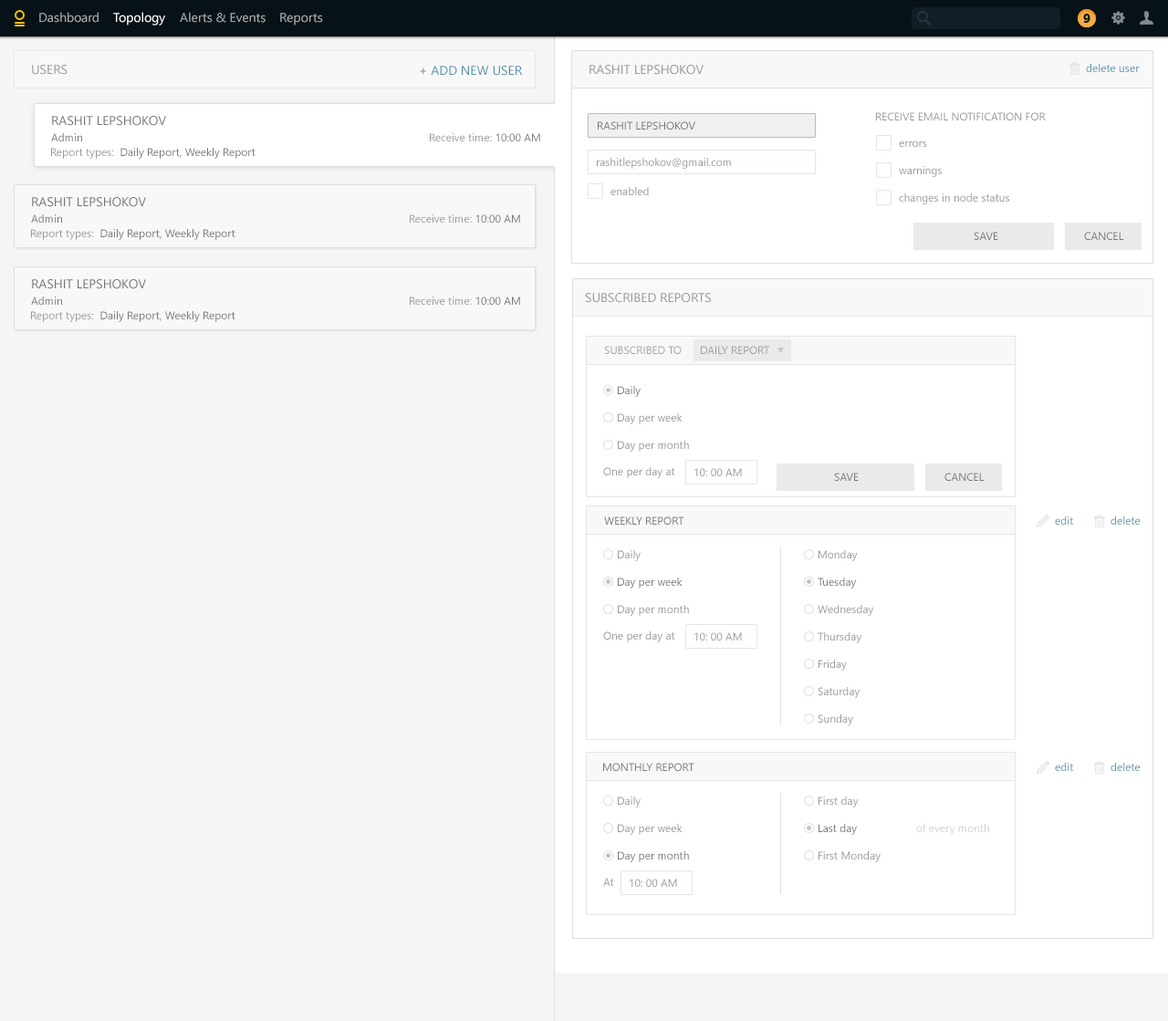
<style>
.page{position:relative;width:1168px;height:1021px;background:#ffffff}
.page>*{position:absolute;margin:0}
.t1{font:12.8px "SegoeUI";color:#a4a6a7}
.t2{font:12.8px "SegoeUI";color:#fefefe}
.t3{font:12.8px "SegoeUI-Bold";color:#071118}
.t4{font:12.8px "SegoeUI";color:#999999;text-transform:uppercase}
.t5{font:12.8px "SegoeUI";color:#5693ae;text-transform:uppercase}
.t6{font:10.9px "SegoeUI";color:#5693ae}
.t7{font:10.9px "SegoeUI";color:#999999;text-transform:uppercase}
.t8{font:12.8px "SegoeUI";color:#777777;text-transform:uppercase}
.t9{font:10.9px "SegoeUI";color:#777777;text-transform:uppercase}
.t10{font:10.9px "SegoeUI";color:#777777}
.t11{font:10.9px "SegoeUI";color:#999999}
.t12{font:10.9px "SegoeUI";color:#a4a4a4;text-transform:uppercase}
.t13{font:10.9px "SegoeUI";color:#9f9f9f;text-transform:uppercase}
.t14{font:10.9px "SegoeUI";color:#5895af}
.t15{font:10.9px "SegoeUI";color:#d2d2d2}
</style>
<div class="page">
<p class="t1" style="left:39px;top:12px;width:60px;height:11px">Dashboard</p>
<p class="t2" style="left:113px;top:12px;width:52px;height:14px">Topology</p>
<p class="t1" style="left:180px;top:12px;width:86px;height:11px">Alerts &amp; Events</p>
<p class="t1" style="left:280px;top:13px;width:43px;height:13px">Reports</p>
<p class="t3" style="left:1083px;top:14px;width:7px;height:9px;opacity:0.7">9</p>
<p class="t3" style="left:1083px;top:14px;width:7px;height:9px">9</p>
<p class="t4" style="left:32px;top:65px;width:36px;height:10px">Users</p>
<p class="t5" style="left:420px;top:66px;width:103px;height:10px">+ add new User</p>
<p class="t4" style="left:589px;top:65px;width:114px;height:10px">Rashit Lepshokov</p>
<p class="t6" style="left:1086px;top:64px;width:54px;height:8px">delete user</p>
<p class="t7" style="left:876px;top:112px;width:170px;height:8px">receive email notification for</p>
<p class="t8" style="left:52px;top:116px;width:114px;height:10px">Rashit Lepshokov</p>
<p class="t9" style="left:598px;top:121px;width:97px;height:9px">Rashit Lepshokov</p>
<p class="t10" style="left:51px;top:133px;width:31px;height:8px">Admin</p>
<p class="t11" style="left:430px;top:133px;width:110px;height:8px">Receive time: <span class="t10">10:00 AM</span></p>
<p class="t10" style="left:51px;top:148px;width:204px;height:11px"><span class="t11">Report types: </span> Daily Report, Weekly Report</p>
<p class="t11" style="left:899px;top:141px;width:28px;height:6px">errors</p>
<p class="t11" style="left:597px;top:158px;width:134px;height:11px">rashitlepshokov@gmail.com</p>
<p class="t11" style="left:899px;top:166px;width:43px;height:11px">warnings</p>
<p class="t8" style="left:32px;top:197px;width:114px;height:10px">Rashit Lepshokov</p>
<p class="t11" style="left:610px;top:187px;width:39px;height:8px">enabled</p>
<p class="t11" style="left:899px;top:193px;width:110px;height:11px">changes in node status</p>
<p class="t10" style="left:31px;top:214px;width:31px;height:9px">Admin</p>
<p class="t11" style="left:410px;top:214px;width:110px;height:9px">Receive time: <span class="t10">10:00 AM</span></p>
<p class="t10" style="left:31px;top:229px;width:204px;height:11px"><span class="t11">Report types: </span> Daily Report, Weekly Report</p>
<p class="t9" style="left:974px;top:232px;width:24px;height:8px">Save</p>
<p class="t9" style="left:1084px;top:232px;width:40px;height:8px">Cancel</p>
<p class="t8" style="left:32px;top:279px;width:114px;height:10px">Rashit Lepshokov</p>
<p class="t4" style="left:585px;top:293px;width:126px;height:10px">Subscribed reports</p>
<p class="t10" style="left:31px;top:297px;width:31px;height:8px">Admin</p>
<p class="t11" style="left:410px;top:297px;width:110px;height:8px">Receive time: <span class="t10">10:00 AM</span></p>
<p class="t10" style="left:31px;top:311px;width:204px;height:11px"><span class="t11">Report types: </span> Daily Report, Weekly Report</p>
<p class="t12" style="left:604px;top:346px;width:78px;height:8px">Subscribed to</p>
<p class="t13" style="left:701px;top:346px;width:68px;height:8px">Daily Report</p>
<p class="t10" style="left:618px;top:386px;width:23px;height:11px">Daily</p>
<p class="t11" style="left:618px;top:413px;width:64px;height:11px">Day per week</p>
<p class="t11" style="left:618px;top:441px;width:71px;height:11px">Day per month</p>
<p class="t11" style="left:603px;top:467px;width:72px;height:11px">One per day at</p>
<p class="t11" style="left:694px;top:468px;width:48px;height:8px">10: 00 AM</p>
<p class="t9" style="left:834px;top:473px;width:25px;height:8px">Save</p>
<p class="t9" style="left:944px;top:473px;width:41px;height:8px">Cancel</p>
<p class="t9" style="left:604px;top:516px;width:80px;height:9px">Weekly Report</p>
<p class="t14" style="left:1055px;top:516px;width:18px;height:9px">edit</p>
<p class="t14" style="left:1110px;top:516px;width:31px;height:9px">delete</p>
<p class="t11" style="left:618px;top:550px;width:23px;height:11px">Daily</p>
<p class="t11" style="left:818px;top:550px;width:40px;height:11px">Monday</p>
<p class="t10" style="left:618px;top:578px;width:64px;height:11px">Day per week</p>
<p class="t10" style="left:818px;top:578px;width:39px;height:11px">Tuesday</p>
<p class="t11" style="left:618px;top:605px;width:71px;height:11px">Day per month</p>
<p class="t11" style="left:818px;top:605px;width:56px;height:11px">Wednesday</p>
<p class="t11" style="left:603px;top:631px;width:72px;height:11px">One per day at</p>
<p class="t11" style="left:694px;top:632px;width:48px;height:9px">10: 00 AM</p>
<p class="t11" style="left:818px;top:632px;width:44px;height:11px">Thursday</p>
<p class="t11" style="left:818px;top:660px;width:29px;height:11px">Friday</p>
<p class="t11" style="left:818px;top:687px;width:42px;height:11px">Saturday</p>
<p class="t11" style="left:818px;top:714px;width:35px;height:11px">Sunday</p>
<p class="t9" style="left:603px;top:763px;width:91px;height:8px">Monthly report</p>
<p class="t14" style="left:1055px;top:763px;width:18px;height:8px">edit</p>
<p class="t14" style="left:1110px;top:763px;width:31px;height:8px">delete</p>
<p class="t11" style="left:618px;top:797px;width:23px;height:10px">Daily</p>
<p class="t11" style="left:818px;top:797px;width:41px;height:10px">First day</p>
<p class="t11" style="left:618px;top:824px;width:64px;height:11px">Day per week</p>
<p class="t10" style="left:818px;top:824px;width:39px;height:11px">Last day</p>
<p class="t15" style="left:916px;top:824px;width:73px;height:11px">of every month</p>
<p class="t10" style="left:618px;top:851px;width:71px;height:11px">Day per month</p>
<p class="t11" style="left:818px;top:851px;width:62px;height:11px">First Monday</p>
<p class="t11" style="left:603px;top:878px;width:11px;height:8px">At</p>
<p class="t11" style="left:630px;top:879px;width:47px;height:8px">10: 00 AM</p>
</div>
